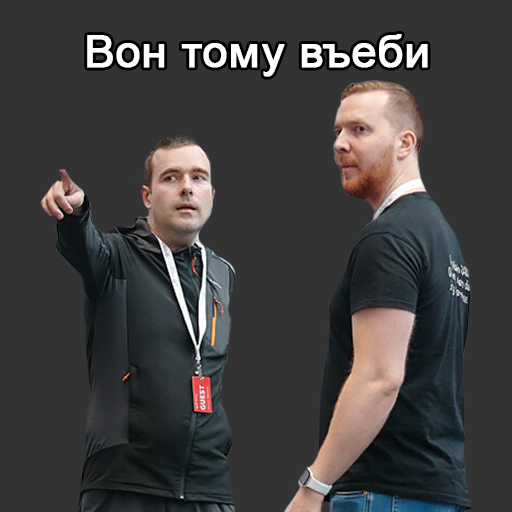
<style>
.page{position:relative;width:512px;height:512px;background:#333333}
.page>*{position:absolute;margin:0}
.t1{font:45px "ArialMT";color:#ffffff;font-weight:bold}
</style>
<div class="page">
<p class="t1" style="left:87px;top:34px;width:341px;height:43px">Вон тому въеби</p>
</div>
